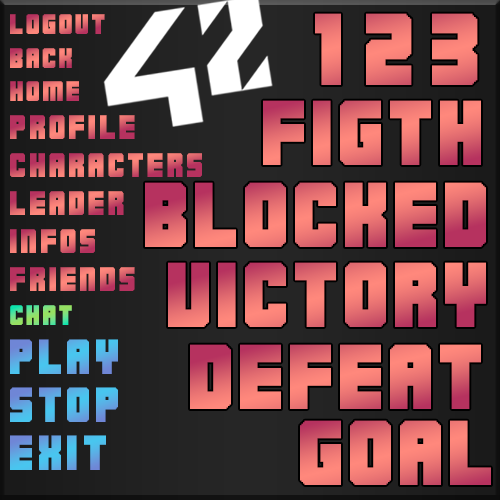
<style>
.page{position:relative;width:500px;height:500px}
.page>*{position:absolute;margin:0}
.t1{font:20px "M23_HYDRANT-SPECIAL";letter-spacing:0.1em}
.t2{font:72px "M23_HYDRANT-SPECIAL";letter-spacing:0.1em;color:#eb7574}
.t3{font:65px "M23_HYDRANT-SPECIAL";letter-spacing:0.05em}
.t4{font:24px "M23_HYDRANT-SPECIAL";letter-spacing:0.1em}
.t5{font:35px "M23_HYDRANT-SPECIAL";letter-spacing:0.1em;color:#59b1e6}
.t6{font:35px "M23_HYDRANT-SPECIAL";letter-spacing:0.1em;color:#59b2e6}
.t7{font:65px "M23_HYDRANT-SPECIAL";letter-spacing:0.05em;color:#ec7674}
.t8{font:35px "M23_HYDRANT-SPECIAL";letter-spacing:0.1em;color:#56b6e8}
</style>
<div class="page">
<p class="t1" style="left:10px;top:14px;width:95px;height:20px">LOGOUT</p>
<p class="t2" style="left:315px;top:13px;width:26px;height:72px">1</p>
<p class="t2" style="left:366px;top:13px;width:46px;height:72px">2</p>
<p class="t2" style="left:432px;top:13px;width:46px;height:72px">3</p>
<p class="t1" style="left:10px;top:48px;width:62px;height:20px">BACK</p>
<p class="t1" style="left:10px;top:81px;width:69px;height:20px">HOME</p>
<p class="t3" style="left:263px;top:100px;width:218px;height:65px">FIGTH</p>
<p class="t4" style="left:10px;top:115px;width:125px;height:24px">PROFILE</p>
<p class="t4" style="left:10px;top:153px;width:192px;height:24px">CHARACTERS</p>
<p class="t3" style="left:145px;top:182px;width:341px;height:65px">BLOCKED</p>
<p class="t4" style="left:10px;top:191px;width:114px;height:24px">LEADER</p>
<p class="t4" style="left:10px;top:229px;width:85px;height:24px">INFOS</p>
<p class="t4" style="left:10px;top:267px;width:125px;height:24px">FRIENDS</p>
<p class="t3" style="left:168px;top:262px;width:318px;height:65px">VICTORY</p>
<p class="t1" style="left:10px;top:305px;width:62px;height:20px">CHAT</p>
<p class="t5" style="left:10px;top:339px;width:108px;height:35px">PLAY</p>
<p class="t3" style="left:190px;top:344px;width:291px;height:65px">DEFEAT</p>
<p class="t6" style="left:10px;top:387px;width:108px;height:35px">STOP</p>
<p class="t7" style="left:300px;top:420px;width:191px;height:65px">GOAl</p>
<p class="t8" style="left:10px;top:435px;width:96px;height:35px">EXIT</p>
</div>
